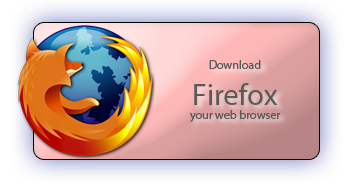
<style>
.page{position:relative;width:351px;height:184px}
.page>*{position:absolute;margin:0}
.t1{font:12px "MyriadPro-Regular";color:#5a5a5a}
.t2{font:30px "MyriadPro-Regular";color:#5a5a5a}
</style>
<div class="page">
<p class="t1" style="left:190px;top:60px;width:90px;height:62px;text-align:center">Download<br><span class="t2">Firefox<br></span>your web browser</p>
</div>
